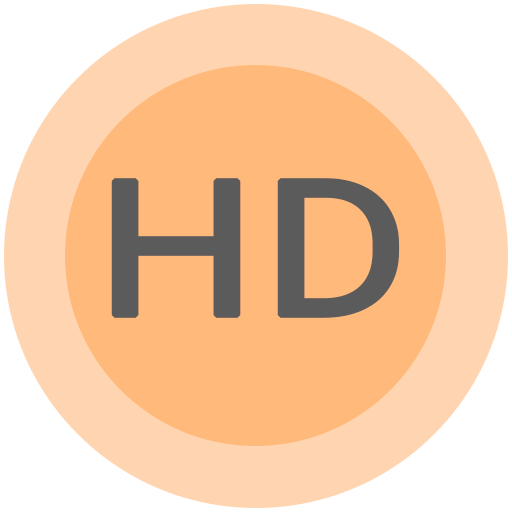
<style>
.page{position:relative;width:512px;height:512px;background:#ffb97b}
.page>*{position:absolute;margin:0}
.t1{font:187.5px "Roboto-Regular";color:#5b5b5b;font-weight:bold;scale:1.2 1}
</style>
<div class="page">
<p class="t1" style="left:111px;top:178px;width:289px;height:140px">HD</p>
</div>
